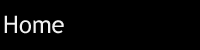
<style>
.page{position:relative;width:200px;height:50px;background:#000000}
.page>*{position:absolute;margin:0}
.t1{font:24px "TrebuchetMS";color:#f1f1f1}
</style>
<div class="page">
<p class="t1" style="left:4px;top:15px;width:60px;height:19px">Home</p>
</div>
